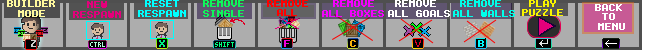
<style>
.page{position:relative;width:650px;height:50px;background:#adadad}
.page>*{position:absolute;margin:0}
.t1{font:8px "Terminal";color:#fff99d;font-weight:bold}
.t2{font:8px "Terminal";color:#e3007b;font-weight:bold}
.t3{font:8px "Terminal";color:#00ffff;font-weight:bold}
.t4{font:8px "Terminal";color:#0ff65b;font-weight:bold}
.t5{font:8px "Terminal";color:#ff0000;font-weight:bold}
.t6{font:8px "Terminal";color:#f500fe;font-weight:bold}
.t7{font:8px "Terminal";color:#ffffff;font-weight:bold}
.t8{font:8px "Terminal";color:#00ffea;font-weight:bold}
.t9{font:8px "Terminal";color:#f8f400;font-weight:bold}
.t10{font:8px "Terminal";color:#00f088;font-weight:bold}
.t11{font:8px "Terminal";color:#f000dc;font-weight:bold}
.t12{font:8px "Terminal";color:#f7b20c;font-weight:bold}
.t13{font:8px "Terminal";color:#00fbfe;font-weight:bold}
.t14{font:6px "Terminal";color:#b1ffdd;font-weight:bold}
.t15{font:6px "Terminal";color:#00ff84;font-weight:bold}
</style>
<div class="page">
<p class="t1" style="left:7px;top:0px;width:48px;height:17px;text-align:center">BUILDER MODE</p>
<p class="t2" style="left:73px;top:1px;width:48px;height:17px;text-align:center">NEW <br>RESPAWN</p>
<p class="t3" style="left:138px;top:0px;width:48px;height:17px;text-align:center">RESET RESPAWN</p>
<p class="t4" style="left:203px;top:0px;width:41px;height:17px;text-align:center">REMOVE<br>SINGLE</p>
<p class="t5" style="left:267px;top:0px;width:41px;height:16px;text-align:center">REMOVE ALL</p>
<p class="t6" style="left:322px;top:0px;width:62px;height:17px;text-align:center">REMOVE <br>ALL BOXES</p>
<p class="t6" style="left:322px;top:0px;width:62px;height:17px;text-align:center">REMOVE <br>ALL BOXES</p>
<p class="t7" style="left:388px;top:0px;width:62px;height:17px;text-align:center">REMOVE <br> ALL GOALS</p>
<p class="t8" style="left:453px;top:0px;width:62px;height:17px;text-align:center">REMOVE <br> ALL WALLS</p>
<p class="t9" style="left:522px;top:0px;width:41px;height:16px;text-align:center">PLAY  PUZZLE</p>
<p class="t7" style="left:595px;top:4px;width:30px;height:26px;text-align:center">BACK <br>TO <br>MENU</p>
<p class="t10" style="left:159px;top:40px;width:6px;height:7px">X</p>
<p class="t11" style="left:284px;top:40px;width:6px;height:7px">F</p>
<p class="t12" style="left:350px;top:40px;width:6px;height:7px">C</p>
<p class="t12" style="left:350px;top:40px;width:6px;height:7px">C</p>
<p class="t13" style="left:478px;top:40px;width:6px;height:7px">B</p>
<p class="t14" style="left:90px;top:42px;width:15px;height:5px">CTRL</p>
<p class="t15" style="left:215px;top:42px;width:19px;height:5px">SHIFT</p>
</div>
